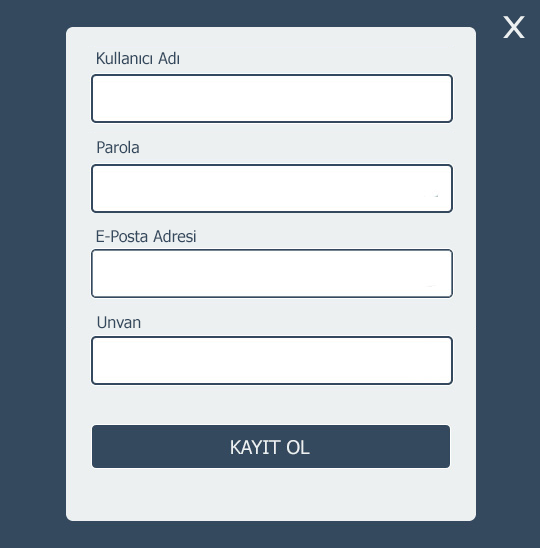
<style>
.page{position:relative;width:540px;height:548px;background:#34495e}
.page>*{position:absolute;margin:0}
.t1{font:30px "Tahoma";color:#ecf0f1;scale:1.26 1}
.t2{font:16px "Tahoma";color:#34495e}
</style>
<div class="page">
<p class="t1" style="left:503px;top:16px;width:22px;height:22px">X</p>
<p class="t2" style="left:97px;top:51px;width:82px;height:14px">Kullanıcı Adı</p>
<p class="t2" style="left:97px;top:140px;width:42px;height:14px">Parola</p>
<p class="t2" style="left:96px;top:229px;width:100px;height:14px">E-Posta Adresi</p>
<p class="t2" style="left:97px;top:316px;width:44px;height:13px">Unvan</p>
</div>
